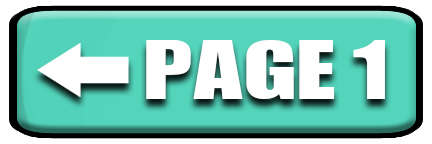
<style>
.page{position:relative;width:432px;height:144px;background:#ffffff}
.page>*{position:absolute;margin:0}
.t1{font:80px "GENUINE";letter-spacing:0.01em;color:#ffffff;text-transform:uppercase;scale:1.35 1}
.t2{font:80px "GENUINE";letter-spacing:0.01em;color:#ffffff;scale:1.35 1}
.t3{font:80px "GENUINE";letter-spacing:0.19em;color:#ffffff;text-transform:uppercase;scale:1.3 1}
</style>
<div class="page">
<p class="t1" style="left:146px;top:40px;width:189px;height:59px">PAG<span class="t2">E</span></p>
<p class="t3" style="left:353px;top:40px;width:32px;height:59px">1</p>
</div>
